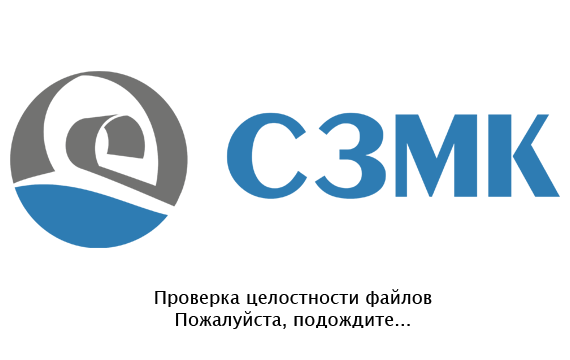
<style>
.page{position:relative;width:570px;height:360px;background:#ffffff}
.page>*{position:absolute;margin:0}
.t1{font:18.1px "LucidaSansUnicode";color:#000000}
</style>
<div class="page">
<p class="t1" style="left:155px;top:289px;width:277px;height:40px;text-align:center">Проверка целостности файлов<br>Пожалуйста, подождите...</p>
</div>
